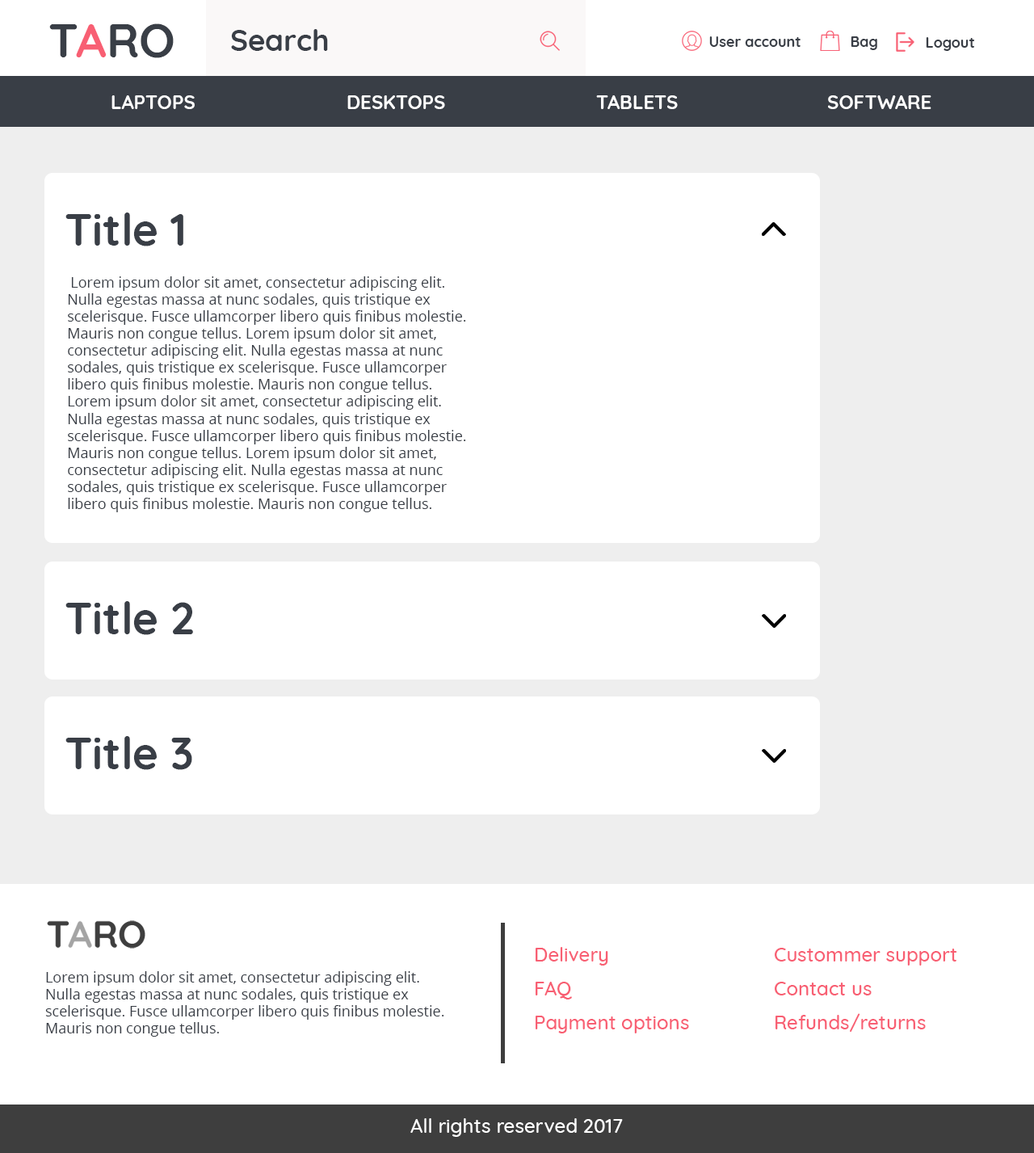
<style>
.page{position:relative;width:1034px;height:1153px;background:#ffffff}
.page>*{position:absolute;margin:0}
.t1{font:47.7px "Quicksand-Bold";color:#393e46}
.t2{font:47.7px "Quicksand-Bold";color:#f85f73}
.t3{font:29.9px "Quicksand-Bold";color:#393e46}
.t4{font:14.5px "Quicksand-Bold";color:#393e46}
.t5{font:19.4px "Quicksand-Bold";color:#ffffff}
.t6{font:44.4px "Quicksand-Bold";color:#393e46}
.t7{font:14.5px/17px "OpenSans";color:#393e46}
.t8{font:19.4px/17px "Quicksand-Medium";color:#f85f73}
.t9{font:19.4px "Quicksand-Medium";color:#ffffff}
</style>
<div class="page">
<p class="t1" style="left:49px;top:23px;width:125px;height:35px">T<span class="t2">A</span>RO</p>
<p class="t3" style="left:231px;top:29px;width:97px;height:22px">Search</p>
<p class="t4" style="left:709px;top:36px;width:92px;height:11px">User account</p>
<p class="t4" style="left:851px;top:36px;width:26px;height:14px">Bag</p>
<p class="t4" style="left:926px;top:37px;width:48px;height:14px">Logout</p>
<p class="t5" style="left:112px;top:95px;width:83px;height:14px">LAPTOPS</p>
<p class="t5" style="left:347px;top:95px;width:98px;height:14px">DESKTOPS</p>
<p class="t5" style="left:596px;top:95px;width:82px;height:14px">TABLETS</p>
<p class="t5" style="left:828px;top:95px;width:104px;height:14px">SOFTWARE</p>
<p class="t6" style="left:65px;top:212px;width:118px;height:34px">Title 1</p>
<p class="t7" style="left:68px;top:276px;width:398px;height:236px">Lorem ipsum dolor sit amet, consectetur adipiscing elit. Nulla egestas massa at nunc sodales, quis tristique ex scelerisque. Fusce ullamcorper libero quis finibus molestie. Mauris non congue tellus. Lorem ipsum dolor sit amet, consectetur adipiscing elit. Nulla egestas massa at nunc sodales, quis tristique ex scelerisque. Fusce ullamcorper libero quis finibus molestie. Mauris non congue tellus. Lorem ipsum dolor sit amet, consectetur adipiscing elit. Nulla egestas massa at nunc sodales, quis tristique ex scelerisque. Fusce ullamcorper libero quis finibus molestie. Mauris non congue tellus. Lorem ipsum dolor sit amet, consectetur adipiscing elit. Nulla egestas massa at nunc sodales, quis tristique ex scelerisque. Fusce ullamcorper libero quis finibus molestie. Mauris non congue tellus.</p>
<p class="t6" style="left:65px;top:601px;width:128px;height:34px">Title 2</p>
<p class="t6" style="left:65px;top:736px;width:127px;height:34px">Title 3</p>
<p class="t8" style="left:536px;top:947px;width:153px;height:86px">Delivery<br><br>FAQ<br><br>Payment options</p>
<p class="t8" style="left:775px;top:948px;width:182px;height:84px">Custommer support<br><br>Contact us<br><br>Refunds/returns</p>
<p class="t7" style="left:45px;top:971px;width:399px;height:66px">Lorem ipsum dolor sit amet, consectetur adipiscing elit. Nulla egestas massa at nunc sodales, quis tristique ex scelerisque. Fusce ullamcorper libero quis finibus molestie. Mauris non congue tellus.</p>
<p class="t9" style="left:410px;top:1118px;width:213px;height:19px">All rights reserved 2017</p>
</div>
